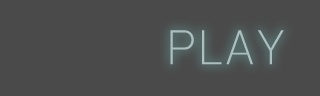
<style>
.page{position:relative;width:320px;height:96px;background:#4a4a4a}
.page>*{position:absolute;margin:0}
.t1{font:48px "DistrictPro-Thin";color:#acbebf}
</style>
<div class="page">
<p class="t1" style="left:170px;top:30px;width:114px;height:35px">P L A Y</p>
</div>
